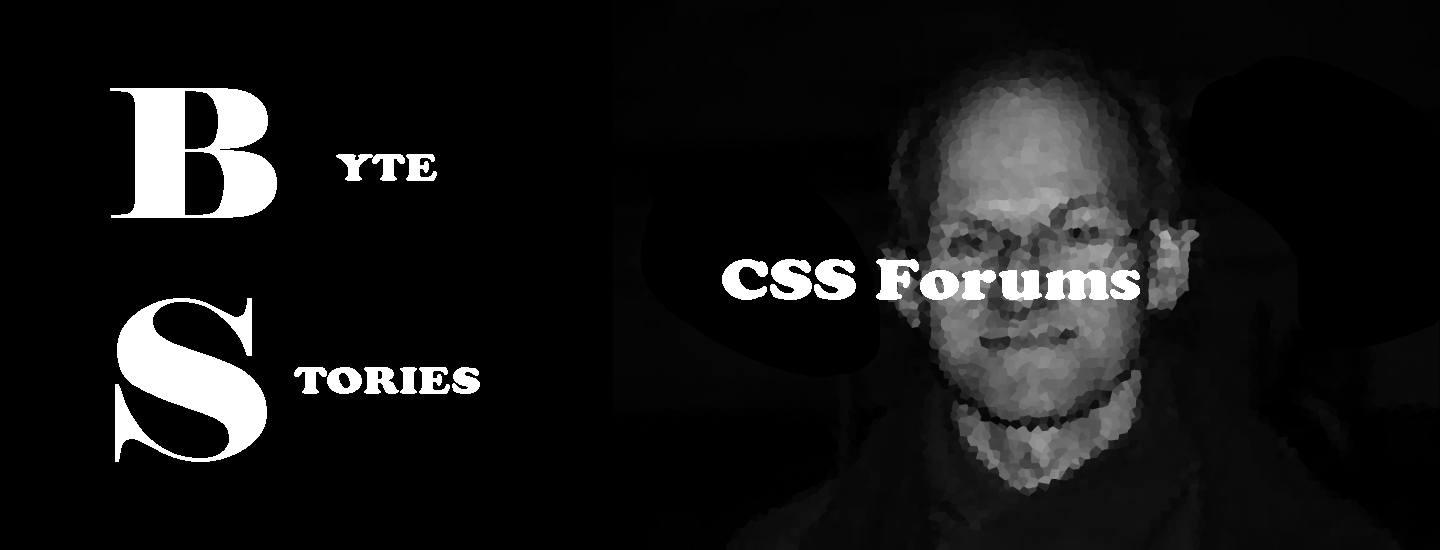
<style>
.page{position:relative;width:1440px;height:550px;background:#000000}
.page>*{position:absolute;margin:0}
.t1{font:177.5px "Elephant-Regular";color:#ffffff;scale:1.15 1}
.t2{font:40.8px "CooperBlack";color:#ffffff;scale:1.15 1}
.t3{font:59.5px "CooperBlack";color:#ffffff;scale:1.15 1}
.t4{font:218.8px "Elephant-Regular";color:#ffffff;scale:1.15 1}
</style>
<div class="page">
<p class="t1" style="left:110px;top:88px;width:167px;height:130px">B</p>
<p class="t2" style="left:336px;top:154px;width:101px;height:27px">YTE</p>
<p class="t3" style="left:722px;top:259px;width:418px;height:41px">CSS Forums</p>
<p class="t4" style="left:115px;top:298px;width:152px;height:164px">S</p>
<p class="t2" style="left:294px;top:367px;width:186px;height:27px">TORIES</p>
</div>
